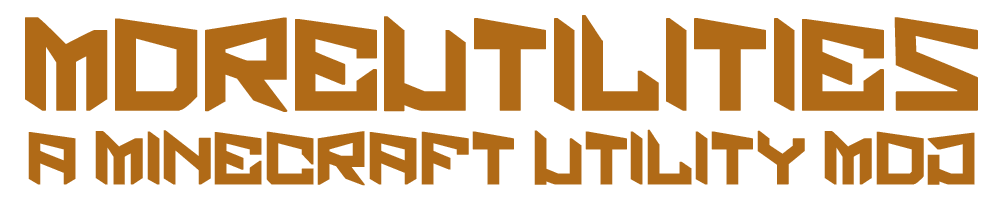
<style>
.page{position:relative;width:1000px;height:200px;background:#ffffff}
.page>*{position:absolute;margin:0}
.t1{font:95.4px "estate";color:#b06a17;text-transform:uppercase;font-weight:bold}
.t2{font:54.6px "estate";color:#b06a17;text-transform:uppercase;font-weight:bold}
</style>
<div class="page">
<p class="t1" style="left:25px;top:15px;width:953px;height:97px">MoreUtilities</p>
<p class="t2" style="left:28px;top:129px;width:947px;height:57px">a Minecraft utility mod</p>
</div>
